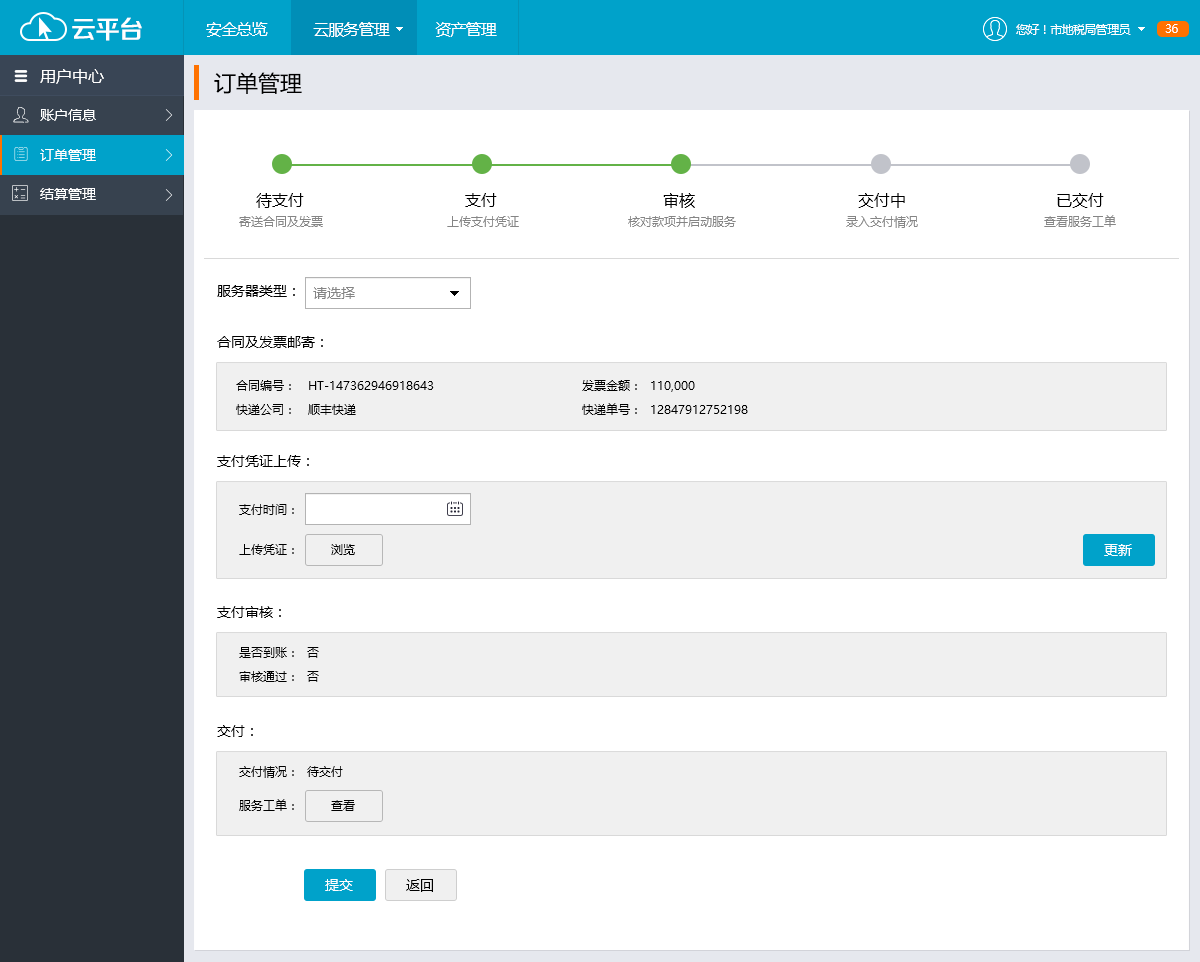
<style>
.page{position:relative;width:1200px;height:962px;background:#ffffff}
.page>*{position:absolute;margin:0}
.t1{font:25.4px "FZZZHONGJW--GB1-0";letter-spacing:-0.05em;color:#ffffff}
.t2{font:16px "MicrosoftYaHei";letter-spacing:-0.05em;color:#ffffff}
.t3{font:12px "MicrosoftYaHei";letter-spacing:-0.05em;color:#ffffff}
.t4{font:16px "MicrosoftYaHei";color:#ffffff}
.t5{font:22px "MicrosoftYaHei";color:#000000}
.t6{font:14px "MicrosoftYaHei";color:#ffffff}
.t7{font:16px "MicrosoftYaHei";color:#000000}
.t8{font:12px "MicrosoftYaHei";color:#858585}
.t9{font:14px "MicrosoftYaHei";color:#000000}
.t10{font:14px "MicrosoftYaHei";color:#858585}
.t11{font:12px/23.6px "MicrosoftYaHei";color:#000000}
.t12{font:12px "MicrosoftYaHei";color:#000000}
</style>
<div class="page">
<p class="t1" style="left:72px;top:17px;width:70px;height:24px">云平台</p>
<p class="t2" style="left:206px;top:22px;width:291px;height:15px">安全总览           云服务管理           资产管理</p>
<p class="t3" style="left:1016px;top:24px;width:115px;height:11px">您好！市地税局管理员</p>
<p class="t3" style="left:1165px;top:24px;width:13px;height:9px">36</p>
<p class="t4" style="left:40px;top:69px;width:64px;height:15px">用户中心</p>
<p class="t5" style="left:214px;top:72px;width:88px;height:22px">订单管理</p>
<p class="t6" style="left:40px;top:109px;width:56px;height:12px">账户信息</p>
<p class="t6" style="left:40px;top:149px;width:56px;height:12px">订单管理</p>
<p class="t6" style="left:40px;top:188px;width:56px;height:12px">结算管理</p>
<p class="t7" style="left:256px;top:193px;width:48px;height:15px">待支付</p>
<p class="t7" style="left:465px;top:193px;width:32px;height:14px">支付</p>
<p class="t7" style="left:663px;top:193px;width:32px;height:15px">审核</p>
<p class="t7" style="left:858px;top:193px;width:47px;height:15px">交付中</p>
<p class="t7" style="left:1057px;top:193px;width:47px;height:15px">已交付</p>
<p class="t8" style="left:239px;top:216px;width:84px;height:11px">寄送合同及发票</p>
<p class="t8" style="left:447px;top:216px;width:72px;height:11px">上传支付凭证</p>
<p class="t8" style="left:628px;top:216px;width:108px;height:11px">核对款项并启动服务</p>
<p class="t8" style="left:846px;top:216px;width:72px;height:12px">录入交付情况</p>
<p class="t8" style="left:1044px;top:215px;width:72px;height:12px">查看服务工单</p>
<p class="t9" style="left:217px;top:285px;width:78px;height:12px">服务器类型：</p>
<p class="t10" style="left:313px;top:287px;width:42px;height:12px">请选择</p>
<p class="t9" style="left:217px;top:336px;width:106px;height:12px">合同及发票邮寄：</p>
<p class="t11" style="left:236px;top:380px;width:198px;height:35px">合同编号：   HT-147362946918643<br>快递公司：   顺丰快递</p>
<p class="t11" style="left:582px;top:380px;width:166px;height:35px">发票金额：  110,000<br>快递单号：  12847912752198</p>
<p class="t9" style="left:217px;top:455px;width:92px;height:12px">支付凭证上传：</p>
<p class="t12" style="left:239px;top:504px;width:55px;height:11px">支付时间：</p>
<p class="t12" style="left:239px;top:544px;width:55px;height:11px">上传凭证：</p>
<p class="t12" style="left:331px;top:544px;width:24px;height:11px">浏览</p>
<p class="t6" style="left:1104px;top:544px;width:28px;height:12px">更新</p>
<p class="t9" style="left:217px;top:606px;width:64px;height:12px">支付审核：</p>
<p class="t11" style="left:239px;top:647px;width:80px;height:35px">是否到账：  否<br>审核通过：  否</p>
<p class="t9" style="left:217px;top:725px;width:36px;height:12px">交付：</p>
<p class="t12" style="left:239px;top:766px;width:104px;height:12px">交付情况：  待交付</p>
<p class="t12" style="left:239px;top:799px;width:55px;height:12px">服务工单：</p>
<p class="t12" style="left:331px;top:800px;width:24px;height:11px">查看</p>
<p class="t6" style="left:325px;top:879px;width:28px;height:12px">提交</p>
<p class="t9" style="left:406px;top:879px;width:27px;height:13px">返回</p>
</div>
